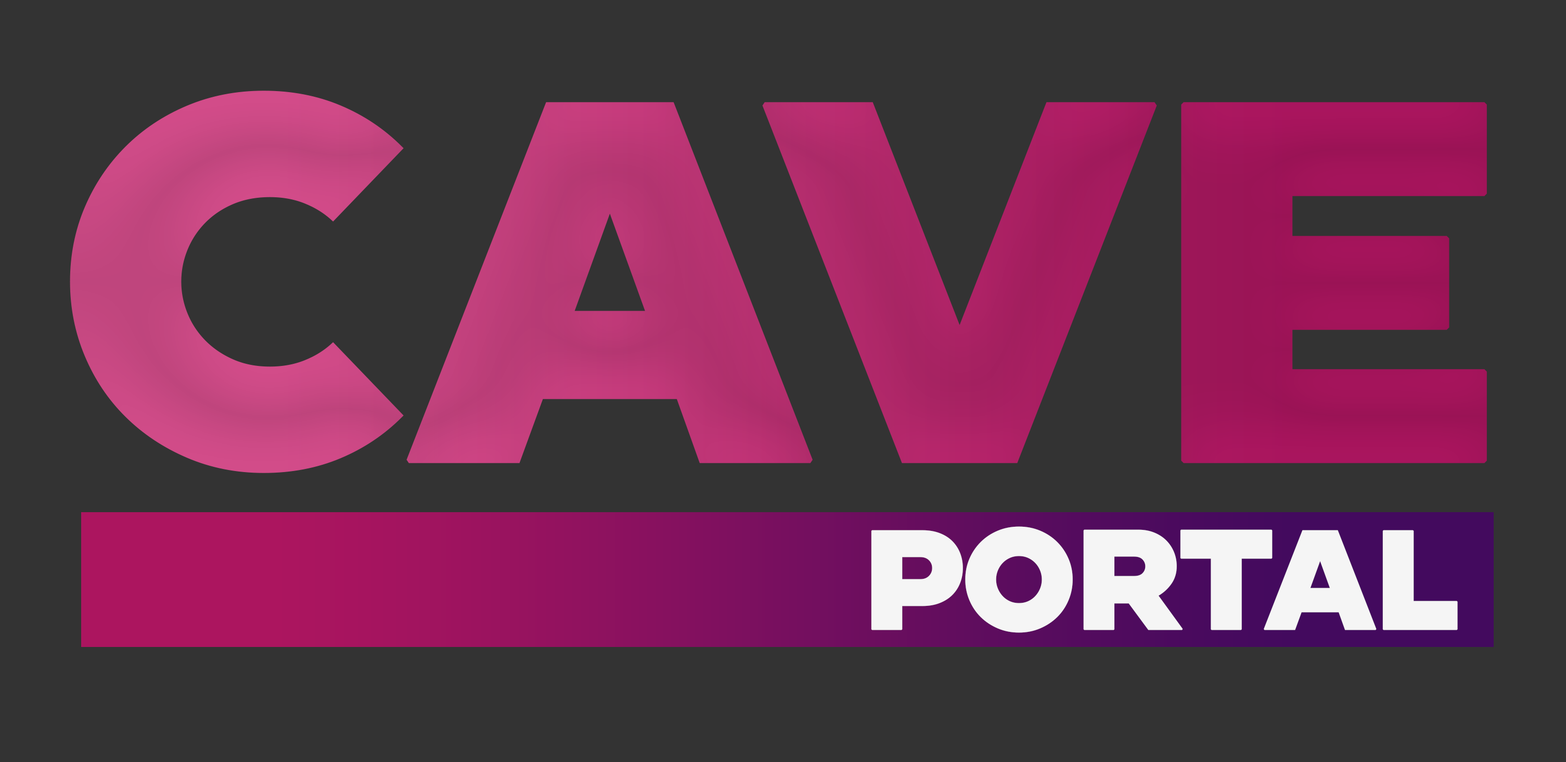
<style>
.page{position:relative;width:1566px;height:762px;background:#333333}
.page>*{position:absolute;margin:0}
.t1{font:508.8px "Conneqt-Black";letter-spacing:-0.06em;font-weight:bold}
.t2{font:141px "Conneqt-Black";letter-spacing:-0.06em;color:#f5f5f5;font-weight:bold}
</style>
<div class="page">
<p class="t1" style="left:70px;top:91px;width:1417px;height:382px">cave</p>
<p class="t2" style="left:871px;top:526px;width:587px;height:107px">PORTAL</p>
</div>
